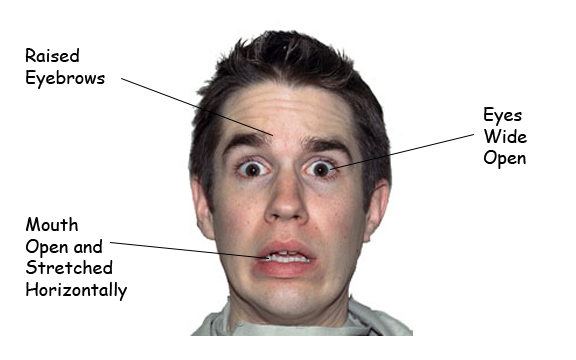
<style>
.page{position:relative;width:576px;height:360px;background:#ffffff}
.page>*{position:absolute;margin:0}
.t1{font:18px "ComicSansMS";color:#000000}
</style>
<div class="page">
<p class="t1" style="left:25px;top:48px;width:80px;height:41px">Raised<br>Eyebrows</p>
<p class="t1" style="left:483px;top:107px;width:44px;height:62px">Eyes<br>Wide<br>Open</p>
<p class="t1" style="left:25px;top:217px;width:102px;height:84px">Mouth<br>Open and<br>Stretched<br>Horizontally</p>
</div>
